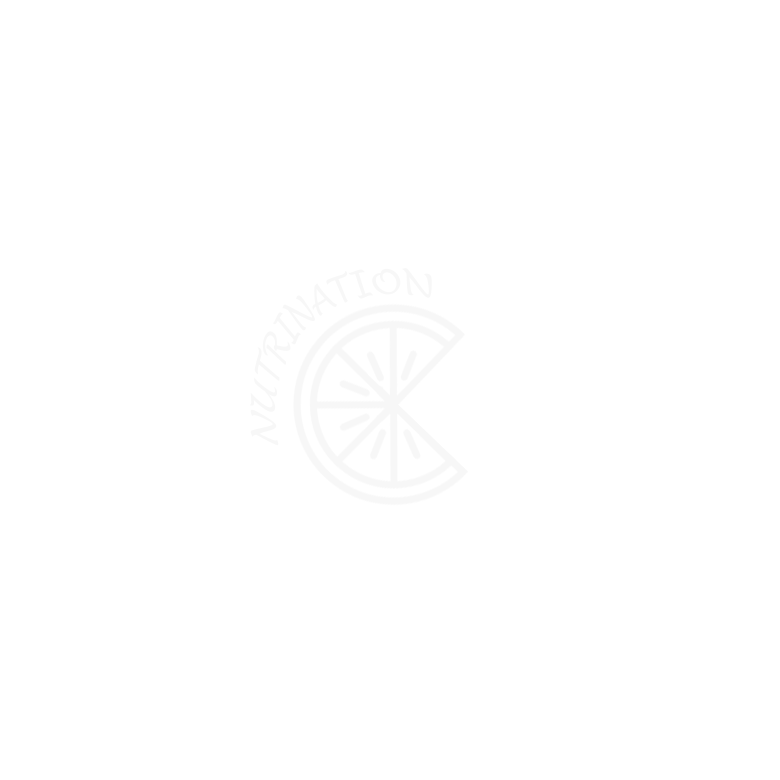
<style>
.page{position:relative;width:780px;height:780px;background:#ffffff}
.page>*{position:absolute;margin:0}
.t1{font:38.9px "LucidaHandwriting-Italic";color:#f7f7f7;scale:0.65 1}
</style>
<div class="page">
<p class="t1" style="left:249px;top:268px;width:183px;height:178px;rotate:-44deg">NUTRINATION</p>
</div>
